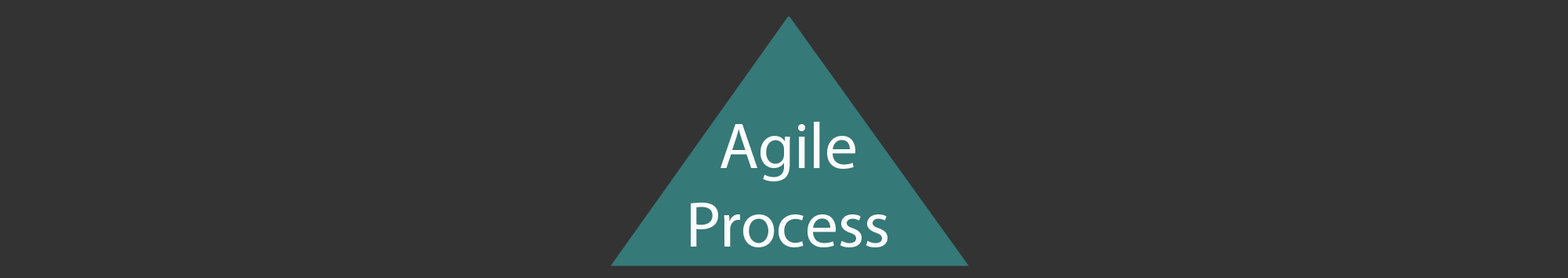
<style>
.page{position:relative;width:1568px;height:278px;background:#333333}
.page>*{position:absolute;margin:0}
.t1{font:65.3px "MyriadPro-Regular";color:#fafcfc}
</style>
<div class="page">
<p class="t1" style="left:691px;top:122px;width:196px;height:125px;text-align:center">Agile<br>Process</p>
</div>
